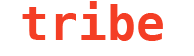
<style>
.page{position:relative;width:194px;height:56px;background:#ffffff}
.page>*{position:absolute;margin:0}
.t1{font:24px "Menlo-Bold";color:#f43e25}
</style>
<div class="page">
<p class="t1" style="left:22px;top:1px;width:141px;height:40px">tribe</p>
</div>
